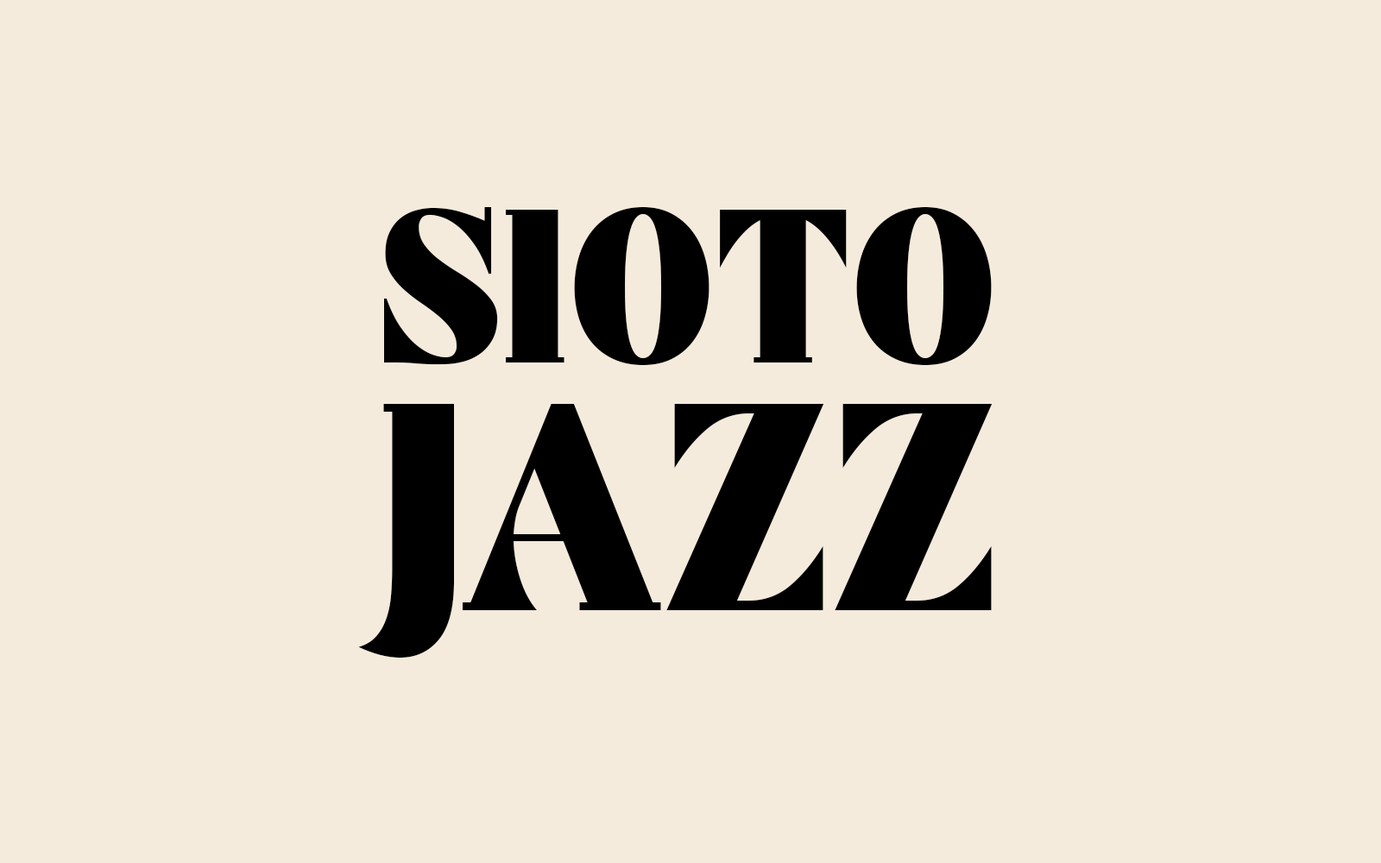
<style>
.page{position:relative;width:1381px;height:863px;background:#f4ebdd}
.page>*{position:absolute;margin:0}
.t1{font:218.3px "Astrella-Regular";color:#000000}
.t2{font:294.1px "Astrella-Regular";color:#000000}
</style>
<div class="page">
<p class="t1" style="left:384px;top:207px;width:608px;height:158px">SIOTO</p>
<p class="t2" style="left:358px;top:404px;width:635px;height:254px">JAZZ</p>
</div>
